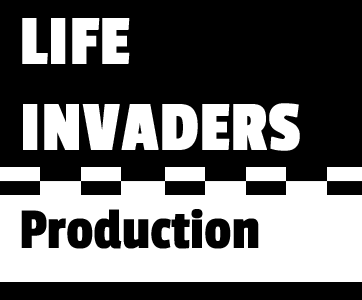
<style>
.page{position:relative;width:362px;height:300px;background:#000000}
.page>*{position:absolute;margin:0}
.t1{font:72.4px "PassionOne-Regular";color:#ffffff;font-weight:bold}
.t2{font:60.3px "PassionOne-Regular";color:#000000}
</style>
<div class="page">
<p class="t1" style="left:22px;top:18px;width:278px;height:133px">LIFE<br>INVADERS</p>
<p class="t2" style="left:21px;top:209px;width:238px;height:40px">Production</p>
</div>
